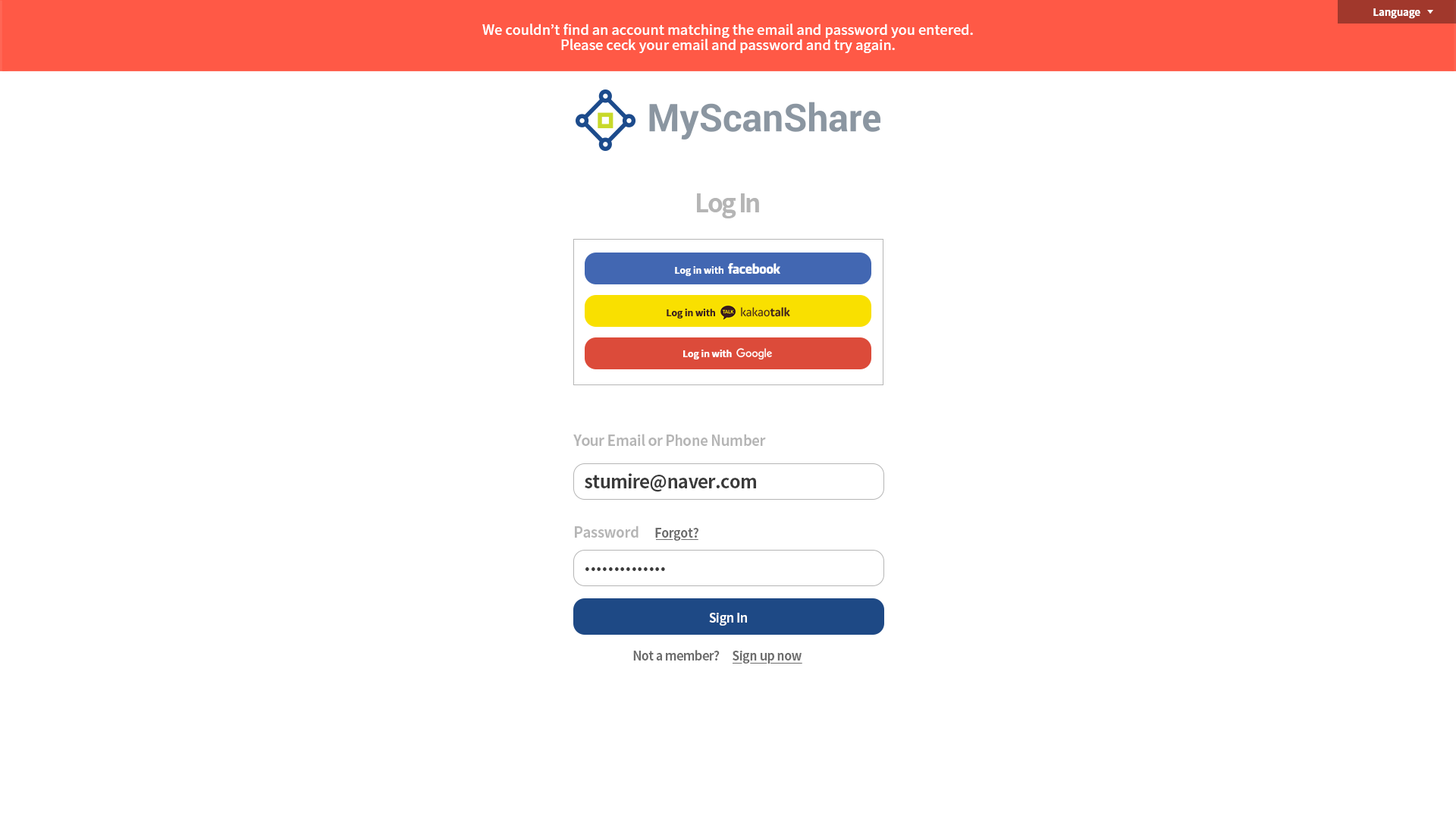
<style>
.page{position:relative;width:1456px;height:819px;background:#ffffff}
.page>*{position:absolute;margin:0}
.t1{font:9.9px "NotoSansKR-Bold";color:#ffffff}
.t2{font:13.6px/15.2px "NotoSansKR-Medium";color:#ffffff}
.t3{font:25.2px "NotoSansKR-Bold";letter-spacing:-0.075em;color:#b5b5b5}
.t4{font:9.1px "NotoSansKR-Bold";color:#ffffff}
.t5{font:9.1px "NotoSansKR-Bold";color:#3b1e1e}
.t6{font:14.5px "NotoSansKR-Bold";letter-spacing:-0.025em;color:#b5b5b5}
.t7{font:18.2px "NotoSansKR-Bold";letter-spacing:-0.025em;color:#3a3a3a}
.t8{font:12.4px "NotoSansKR-Bold";letter-spacing:-0.025em;color:#6d6d6d}
.t9{font:19.8px "NotoSansKR-Bold";letter-spacing:-0.025em;color:#3a3a3a}
.t10{font:12.4px "NotoSansKR-Bold";letter-spacing:-0.025em;color:#ffffff}
</style>
<div class="page">
<p class="t1" style="left:1373px;top:8px;width:47px;height:11px">Language</p>
<p class="t2" style="left:482px;top:24px;width:491px;height:29px;text-align:center">We couldn’t find an account matching the email and password you entered.<br>Please ceck your email and password and try again.</p>
<p class="t3" style="left:697px;top:193px;width:62px;height:25px">Log In</p>
<p class="t4" style="left:675px;top:266px;width:48px;height:10px">Log in with</p>
<p class="t5" style="left:667px;top:309px;width:48px;height:9px">Log in with</p>
<p class="t4" style="left:683px;top:350px;width:49px;height:9px">Log in with</p>
<p class="t6" style="left:573px;top:434px;width:193px;height:12px">Your Email or Phone Number</p>
<p class="t7" style="left:585px;top:473px;width:171px;height:19px">stumire@naver.com</p>
<p class="t6" style="left:575px;top:526px;width:64px;height:12px">Password</p>
<p class="t8" style="left:655px;top:528px;width:43px;height:13px">Forgot?</p>
<p class="t9" style="left:585px;top:567px;width:80px;height:4px">..............</p>
<p class="t10" style="left:709px;top:613px;width:38px;height:13px">Sign In</p>
<p class="t8" style="left:633px;top:650px;width:169px;height:14px">Not a member?     Sign up now</p>
</div>
